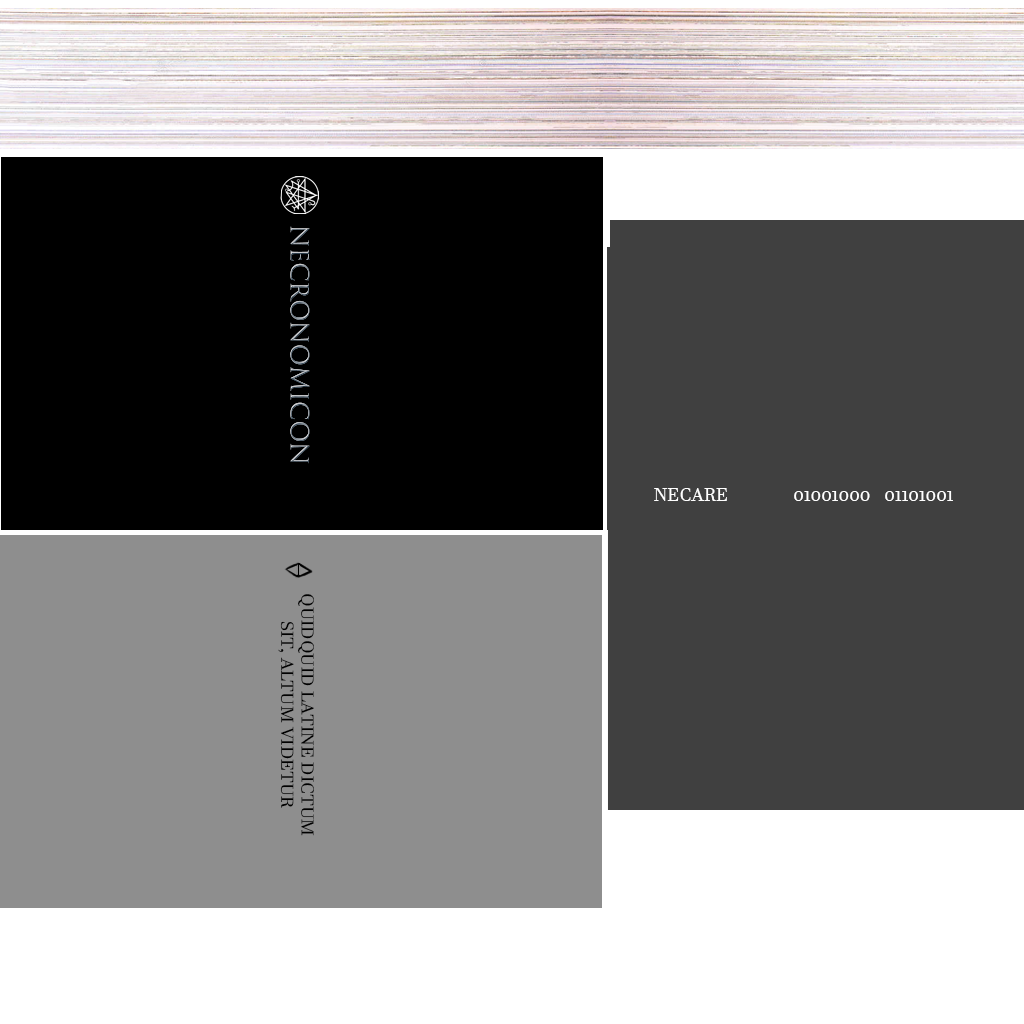
<style>
.page{position:relative;width:1024px;height:1024px;background:#404040}
.page>*{position:absolute;margin:0}
.t1{font:24px "TrajanColor-Concept"}
.t2{font:18px "JavaneseText";color:#ffffff;text-transform:uppercase}
.t3{font:17px "JavaneseText";color:#000000;text-transform:uppercase;scale:1.06 1}
</style>
<div class="page">
<p class="t1" style="left:290px;top:226px;width:20px;height:238px;rotate:90deg">NECRONOMICON</p>
<p class="t2" style="left:654px;top:488px;width:299px;height:13px">NECARE              01001000   01101001</p>
<p class="t3" style="left:278px;top:594px;width:36px;height:242px;text-align:center;rotate:90deg">Quidquid latine dictum<br>sit, altum videtur</p>
</div>
